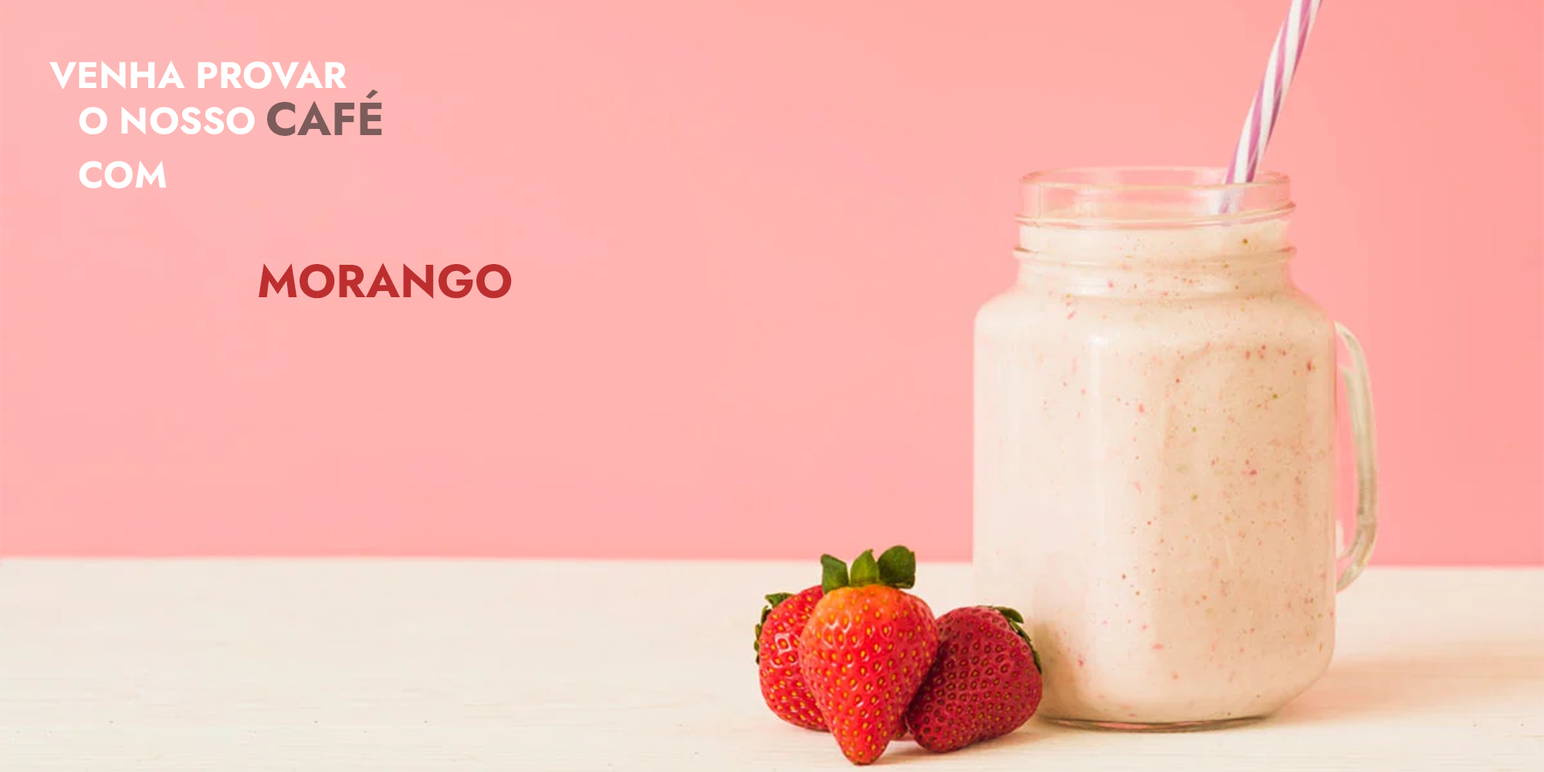
<style>
.page{position:relative;width:1544px;height:772px}
.page>*{position:absolute;margin:0}
.t1{font:37.1px "JostRoman-Bold";color:#ffffff}
.t2{font:46.3px "JostRoman-Bold";color:#7c5b5b}
.t3{font:46.3px "JostRoman-Bold";color:#bd2f2f}
</style>
<div class="page">
<p class="t1" style="left:49px;top:60px;width:298px;height:30px">VENHA PROVAR</p>
<p class="t2" style="left:267px;top:90px;width:115px;height:46px">CAFÉ</p>
<p class="t1" style="left:79px;top:106px;width:176px;height:29px">O NOSSO</p>
<p class="t1" style="left:79px;top:160px;width:88px;height:28px">COM</p>
<p class="t3" style="left:259px;top:263px;width:253px;height:36px">MORANGO</p>
</div>
